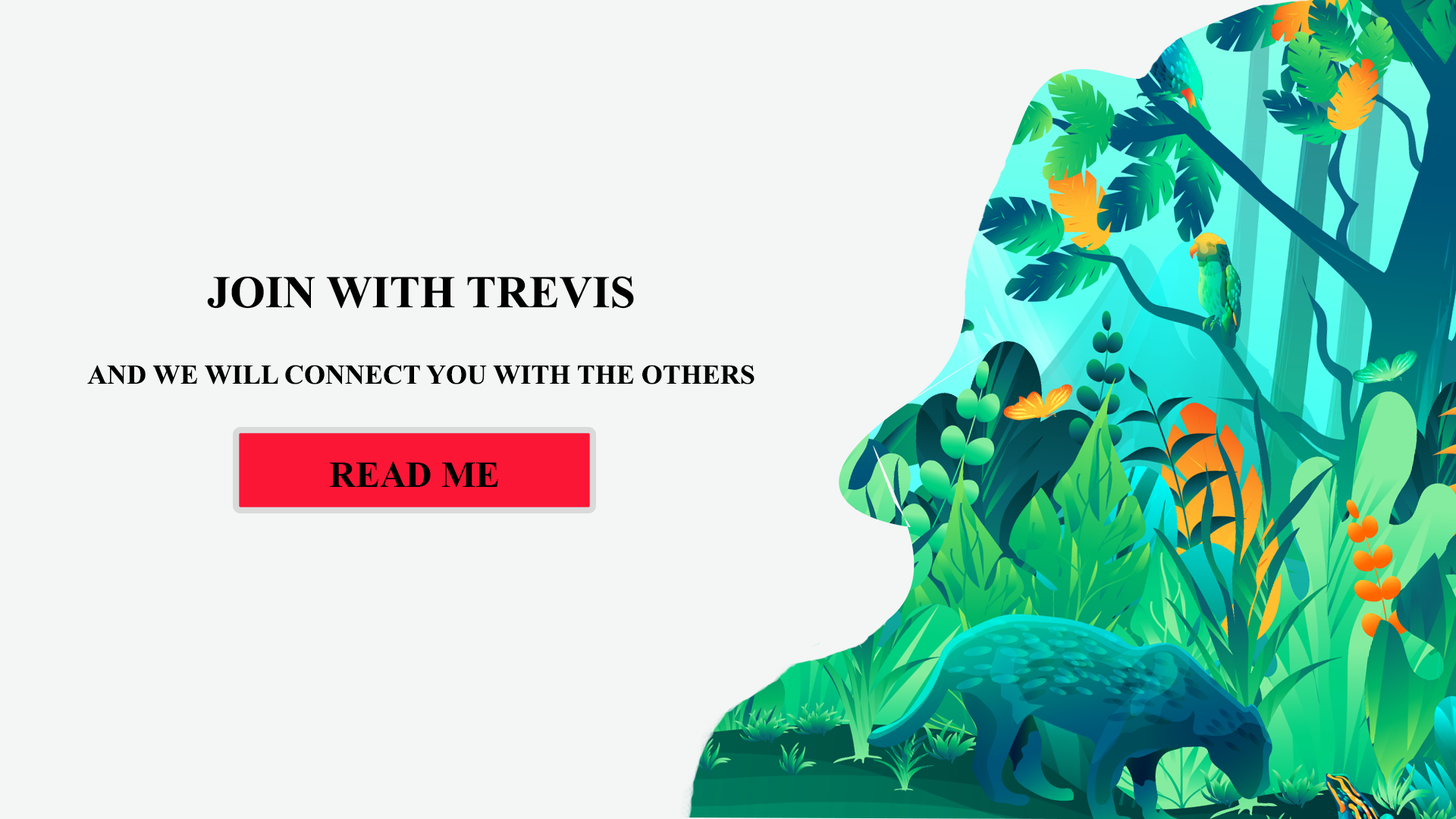
<style>
.page{position:relative;width:1456px;height:819px;background:#f4f5f5}
.page>*{position:absolute;margin:0}
.t1{font:27.3px "TimesNewRomanPS-BoldMT";color:#000000}
.t2{font:36.4px "MyriadPro-Regular";color:#000000}
.t3{font:45.5px "TimesNewRomanPS-BoldMT";color:#000000}
.t4{font:36.4px "TimesNewRomanPS-BoldMT";color:#000000}
</style>
<div class="page">
<p class="t1" style="left:87px;top:276px;width:668px;height:108px;text-align:center"><span class="t2"><br></span><span class="t3">JOIN WITH TREVIS<br><br></span>AND WE WILL CONNECT YOU WITH THE OTHERS</p>
<p class="t4" style="left:329px;top:462px;width:169px;height:25px"><span class="t1"><br></span>READ ME</p>
</div>
